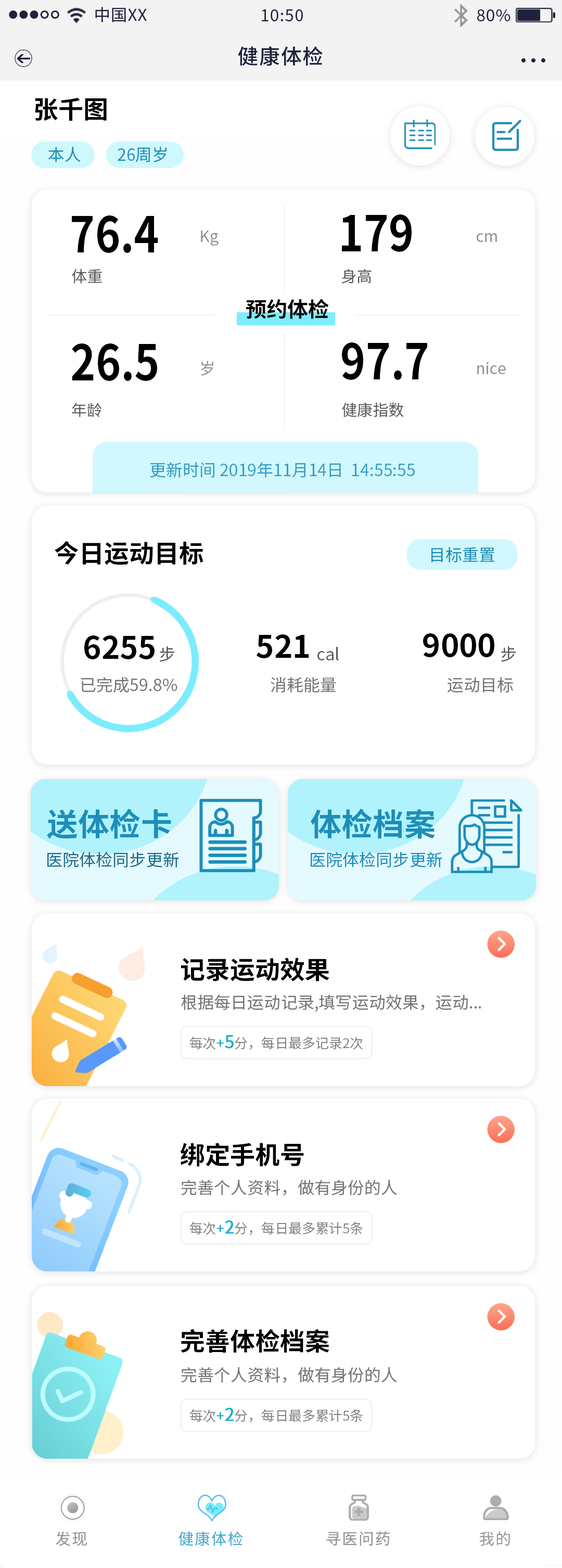
<style>
.page{position:relative;width:562px;height:1568px;background:#ffffff}
.page>*{position:absolute;margin:0}
.t1{font:16.3px "SourceHanSansCN-Regular";letter-spacing:0.04em;color:#1f223a}
.t2{font:20.8px "SourceHanSansCN-Medium";letter-spacing:0.04em;color:#1f223a}
.t3{font:24.9px "SourceHanSansCN-Bold";color:#000000}
.t4{font:16.7px "SourceHanSansCN-Regular";color:#1d8eb9}
.t5{font:49.3px "SourceHanSansCN-Bold";color:#000000;scale:0.87 1}
.t6{font:15.6px "SourceHanSansCN-Regular";color:#8e8e8e}
.t7{font:15.6px "SourceHanSansCN-Regular";color:#595959}
.t8{font:20.8px "SourceHanSansCN-Bold";color:#000000}
.t9{font:16.7px "SourceHanSansCN-Regular";color:#369dc3}
.t10{font:31.2px "SourceHanSansCN-Bold";color:#000000}
.t11{font:16.7px "SourceHanSansCN-Regular";color:#595959}
.t12{font:16.7px "SourceHanSansCN-Regular";color:#757575}
.t13{font:31.2px "SourceHanSansCN-Bold";color:#1d8eb9}
.t14{font:16.7px "SourceHanSansCN-Regular";color:#1b6c8b}
.t15{font:13.5px "SourceHanSansCN-Regular";color:#828282}
.t16{font:13.5px "SourceHanSansCN-Regular";color:#08b4cc;font-weight:bold}
.t17{font:17.2px "SourceHanSansCN-Regular";color:#08b4cc;font-weight:bold}
.t18{font:15.6px "SourceHanSansCN-Regular";letter-spacing:0.06em;color:#929191}
.t19{font:15.6px "SourceHanSansCN-Regular";letter-spacing:0.06em;color:#3ca9cd}
.t20{font:15.6px "SourceHanSansCN-Regular";letter-spacing:0.06em;color:#969696}
</style>
<div class="page">
<p class="t1" style="left:95px;top:7px;width:52px;height:15px">中国XX</p>
<p class="t1" style="left:262px;top:9px;width:41px;height:12px">10:50</p>
<p class="t1" style="left:477px;top:9px;width:34px;height:12px">80%</p>
<p class="t2" style="left:238px;top:46px;width:85px;height:20px">健康体检</p>
<p class="t3" style="left:35px;top:97px;width:72px;height:24px">张千图</p>
<p class="t4" style="left:48px;top:147px;width:33px;height:15px">本人</p>
<p class="t4" style="left:118px;top:147px;width:49px;height:15px">26周岁</p>
<p class="t5" style="left:72px;top:215px;width:86px;height:38px">76.4</p>
<p class="t5" style="left:342px;top:214px;width:70px;height:38px">179</p>
<p class="t6" style="left:201px;top:231px;width:18px;height:15px">Kg</p>
<p class="t6" style="left:477px;top:233px;width:20px;height:9px">cm</p>
<p class="t7" style="left:72px;top:269px;width:30px;height:15px">体重</p>
<p class="t7" style="left:341px;top:269px;width:31px;height:15px">身高</p>
<p class="t8" style="left:246px;top:299px;width:83px;height:20px">预约体检</p>
<p class="t5" style="left:72px;top:343px;width:85px;height:38px">26.5</p>
<p class="t5" style="left:342px;top:342px;width:85px;height:38px">97.7</p>
<p class="t6" style="left:201px;top:361px;width:12px;height:15px">岁</p>
<p class="t6" style="left:477px;top:362px;width:29px;height:12px">nice</p>
<p class="t7" style="left:72px;top:403px;width:30px;height:14px">年龄</p>
<p class="t7" style="left:342px;top:402px;width:62px;height:15px">健康指数</p>
<p class="t9" style="left:150px;top:462px;width:265px;height:16px">更新时间 2019年11月14日  14:55:55</p>
<p class="t3" style="left:55px;top:541px;width:148px;height:24px">今日运动目标</p>
<p class="t4" style="left:431px;top:547px;width:64px;height:16px">目标重置</p>
<p class="t10" style="left:84px;top:635px;width:71px;height:24px">6255</p>
<p class="t10" style="left:256px;top:634px;width:53px;height:24px">521</p>
<p class="t10" style="left:423px;top:633px;width:71px;height:24px">9000</p>
<p class="t11" style="left:160px;top:646px;width:15px;height:16px">步</p>
<p class="t11" style="left:317px;top:647px;width:22px;height:13px">cal</p>
<p class="t11" style="left:501px;top:646px;width:15px;height:16px">步</p>
<p class="t12" style="left:81px;top:677px;width:96px;height:16px">已完成59.8%</p>
<p class="t12" style="left:271px;top:677px;width:65px;height:16px">消耗能量</p>
<p class="t12" style="left:448px;top:677px;width:65px;height:16px">运动目标</p>
<p class="t13" style="left:47px;top:809px;width:124px;height:30px">送体检卡</p>
<p class="t13" style="left:311px;top:809px;width:124px;height:30px">体检档案</p>
<p class="t14" style="left:47px;top:851px;width:132px;height:17px">医院体检同步更新</p>
<p class="t4" style="left:311px;top:851px;width:131px;height:17px">医院体检同步更新</p>
<p class="t3" style="left:181px;top:958px;width:148px;height:23px">记录运动效果</p>
<p class="t12" style="left:181px;top:995px;width:300px;height:17px">根据每日运动记录,填写运动效果，运动...</p>
<p class="t15" style="left:189px;top:1035px;width:174px;height:15px">每次<span class="t16">+</span><span class="t17">5</span>分，每日最多记录2次</p>
<p class="t3" style="left:180px;top:1143px;width:124px;height:24px">绑定手机号</p>
<p class="t12" style="left:181px;top:1180px;width:216px;height:16px">完善个人资料，做有身份的人</p>
<p class="t15" style="left:189px;top:1220px;width:174px;height:15px">每次<span class="t16">+</span><span class="t17">2</span>分，每日最多累计5条</p>
<p class="t3" style="left:181px;top:1329px;width:148px;height:24px">完善体检档案</p>
<p class="t12" style="left:181px;top:1367px;width:216px;height:16px">完善个人资料，做有身份的人</p>
<p class="t15" style="left:189px;top:1408px;width:174px;height:14px">每次<span class="t16">+</span><span class="t17">2</span>分，每日最多累计5条</p>
<p class="t18" style="left:56px;top:1531px;width:31px;height:15px">发现</p>
<p class="t19" style="left:179px;top:1531px;width:64px;height:15px">健康体检</p>
<p class="t20" style="left:326px;top:1531px;width:64px;height:15px">寻医问药</p>
<p class="t20" style="left:479px;top:1531px;width:31px;height:15px">我的</p>
</div>
